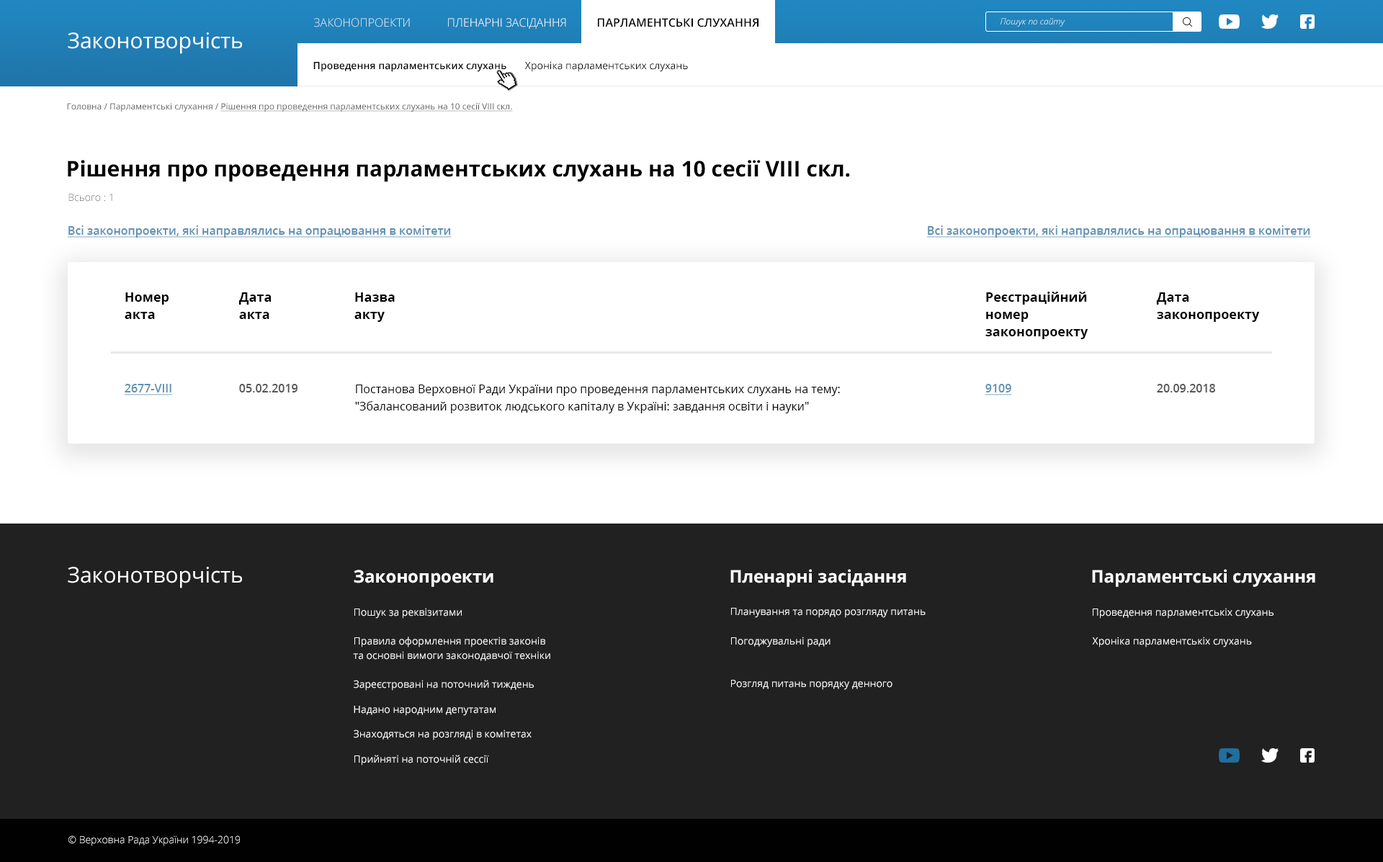
<style>
.page{position:relative;width:1383px;height:862px;background:#ffffff}
.page>*{position:absolute;margin:0}
.t1{font:11.5px "OpenSans-Light";color:#dee9f2;text-transform:uppercase}
.t2{font:11.5px "OpenSans-Light";color:#ffffff;text-transform:uppercase}
.t3{font:11.5px "OpenSans-SemiBold";color:#000000;text-transform:uppercase}
.t4{font:8.6px "OpenSans-LightItalic";color:#ffffff}
.t5{font:21.6px "OpenSans-Regular";color:#ffffff}
.t6{font:10.1px "OpenSans-SemiBold";color:#000000}
.t7{font:10.1px "OpenSans-Regular";color:#000000}
.t8{font:8.6px "OpenSans-Regular";color:#585858;text-decoration:underline}
.t9{font:8.6px "OpenSans-Regular";color:#585858}
.t10{font:21.6px "OpenSans-Bold";color:#000000}
.t11{font:10.1px "OpenSans-Light"}
.t12{font:11.5px "OpenSans-SemiBold";color:#6291b4;text-decoration:underline}
.t13{font:13px/17.3px "OpenSans-Bold";color:#000000}
.t14{font:11.5px "OpenSans-SemiBold";color:#585858}
.t15{font:11.5px/17.3px "OpenSans-Regular";color:#000000}
.t16{font:17.3px "OpenSans-Bold";color:#ffffff}
.t17{font:10.1px "OpenSans-Regular";color:#ffffff}
.t18{font:10.1px/14.4px "OpenSans-Regular";color:#ffffff}
.t19{font:10.1px/18.7px "OpenSans-Regular";color:#ffffff}
.t20{font:10.1px "OpenSans-Light";color:#ffffff}
</style>
<div class="page">
<p class="t1" style="left:314px;top:18px;width:96px;height:9px">Законопроекти</p>
<p class="t2" style="left:448px;top:18px;width:118px;height:11px">пленарні засідання</p>
<p class="t3" style="left:598px;top:18px;width:160px;height:9px">парламентські слухання</p>
<p class="t4" style="left:1001px;top:18px;width:64px;height:9px">Пошук по сайту</p>
<p class="t5" style="left:68px;top:32px;width:174px;height:22px">Законотворчість</p>
<p class="t6" style="left:313px;top:61px;width:375px;height:11px">Проведення парламентських слухань<span class="t7">       Хроніка парламентських слухань</span></p>
<p class="t8" style="left:67px;top:103px;width:446px;height:9px"><span class="t9">Головна / Парламентські слухання / </span>Рішення про проведення парламентських слухань на 10 сесії VIII скл.</p>
<p class="t10" style="left:68px;top:160px;width:782px;height:22px">Рішення про проведення парламентських слухань на 10 сесії VIII скл.</p>
<p class="t11" style="left:68px;top:194px;width:44px;height:8px">Всього : 1</p>
<p class="t12" style="left:67px;top:225px;width:385px;height:13px">Всі законопроекти, які направлялись на опрацювання в комітети</p>
<p class="t12" style="left:926px;top:225px;width:385px;height:13px">Всі законопроекти, які направлялись на опрацювання в комітети</p>
<p class="t13" style="left:125px;top:292px;width:44px;height:27px">Номер<br>акта</p>
<p class="t13" style="left:238px;top:292px;width:33px;height:27px">Дата<br>акта</p>
<p class="t13" style="left:354px;top:292px;width:41px;height:30px">Назва<br>акту</p>
<p class="t13" style="left:985px;top:292px;width:103px;height:47px">Реєстраційний<br>номер<br>законопроекту</p>
<p class="t13" style="left:1156px;top:292px;width:104px;height:30px">Дата<br>законопроекту</p>
<p class="t12" style="left:124px;top:384px;width:49px;height:11px">2677-VIII</p>
<p class="t14" style="left:239px;top:384px;width:58px;height:9px">05.02.2019</p>
<p class="t15" style="left:355px;top:385px;width:485px;height:28px">Постанова Верховної Ради України про проведення парламентських слухань на тему: "Збалансований розвиток людського капіталу в Україні: завдання освіти і науки"</p>
<p class="t12" style="left:985px;top:384px;width:27px;height:11px">9109</p>
<p class="t14" style="left:1157px;top:384px;width:58px;height:9px">20.09.2018</p>
<p class="t5" style="left:68px;top:567px;width:174px;height:21px">Законотворчість</p>
<p class="t16" style="left:354px;top:570px;width:139px;height:17px">Законопроекти</p>
<p class="t16" style="left:730px;top:569px;width:176px;height:18px">Пленарні засідання</p>
<p class="t16" style="left:1092px;top:569px;width:223px;height:18px">Парламентські слухання</p>
<p class="t17" style="left:354px;top:608px;width:108px;height:11px">Пошук за реквізитами</p>
<p class="t17" style="left:731px;top:608px;width:195px;height:10px">Планування та порядо розгляду питань</p>
<p class="t17" style="left:1093px;top:608px;width:181px;height:11px">Проведення парламентськіх слухань</p>
<p class="t18" style="left:353px;top:637px;width:197px;height:24px"><span class="t19">Правила оформлення проектів законів<br></span>та основні вимоги законодавчої техніки</p>
<p class="t17" style="left:731px;top:637px;width:100px;height:11px">Погоджувальні ради</p>
<p class="t17" style="left:1092px;top:637px;width:160px;height:11px">Хроніка парламентськіх слухань</p>
<p class="t17" style="left:354px;top:680px;width:180px;height:11px">Зареєстровані на поточний тиждень</p>
<p class="t17" style="left:731px;top:680px;width:161px;height:10px">Розгляд питань порядку денного</p>
<p class="t17" style="left:354px;top:706px;width:142px;height:10px">Надано народним депутатам</p>
<p class="t17" style="left:354px;top:730px;width:178px;height:10px">Знаходяться на розгляді в комітетах</p>
<p class="t17" style="left:354px;top:755px;width:135px;height:11px">Прийняті на поточній сессії</p>
<p class="t20" style="left:68px;top:836px;width:172px;height:10px">© Верховна Рада України 1994-2019</p>
</div>
